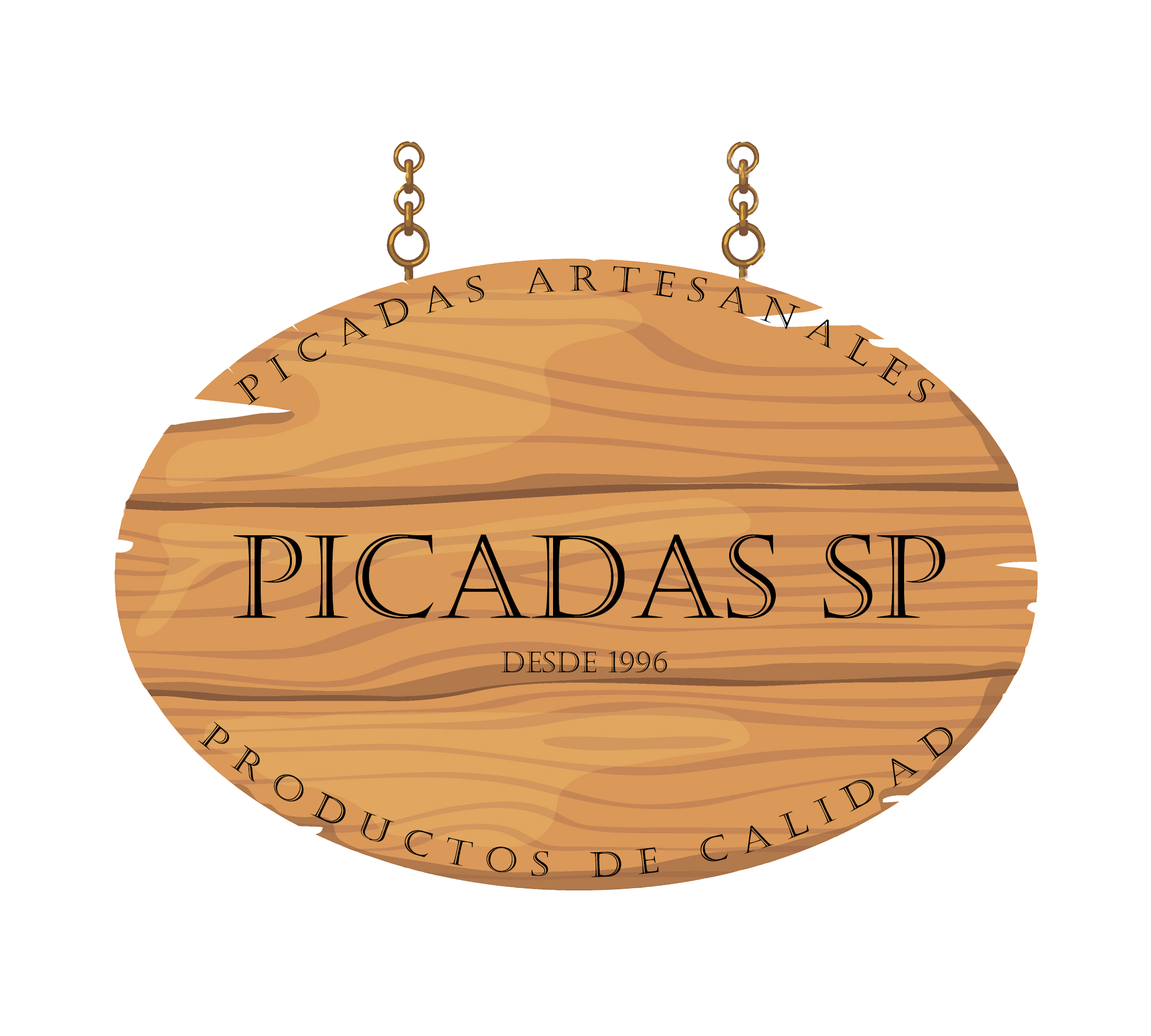
<style>
.page{position:relative;width:1151px;height:1036px;background:#ffffff}
.page>*{position:absolute;margin:0}
.t1{font:34.5px "Castellar";color:#000000}
.t2{font:115.1px "Castellar";color:#000000}
.t3{font:28.8px "Castellar";color:#000000}
</style>
<div class="page">
<p class="t1" style="left:233px;top:265px;width:702px;height:141px">P I C A D A S   A R T E S A N A L E S</p>
<p class="t2" style="left:233px;top:534px;width:713px;height:85px">PICADAS SP</p>
<p class="t3" style="left:501px;top:651px;width:167px;height:22px">DESDE 1996</p>
<p class="t1" style="left:198px;top:721px;width:755px;height:156px">P R O D U C T O S   D E   C A L I D A D</p>
</div>
